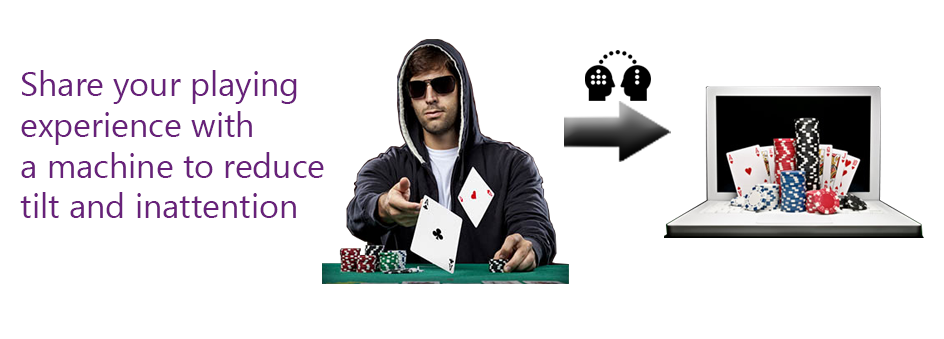
<style>
.page{position:relative;width:944px;height:339px;background:#ffffff}
.page>*{position:absolute;margin:0}
.t1{font:34px "SegoeUI";color:#68217a}
</style>
<div class="page">
<p class="t1" style="left:20px;top:70px;width:304px;height:148px">Share your playing<br>experience with<br>a machine to reduce<br>tilt and inattention</p>
</div>
